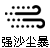
<style>
.page{position:relative;width:50px;height:48px;background:#ffffff}
.page>*{position:absolute;margin:0}
.t1{font:12px "OPPOSans-R";color:#000000}
</style>
<div class="page">
<p class="t1" style="left:2px;top:36px;width:47px;height:11px">强沙尘暴</p>
</div>
